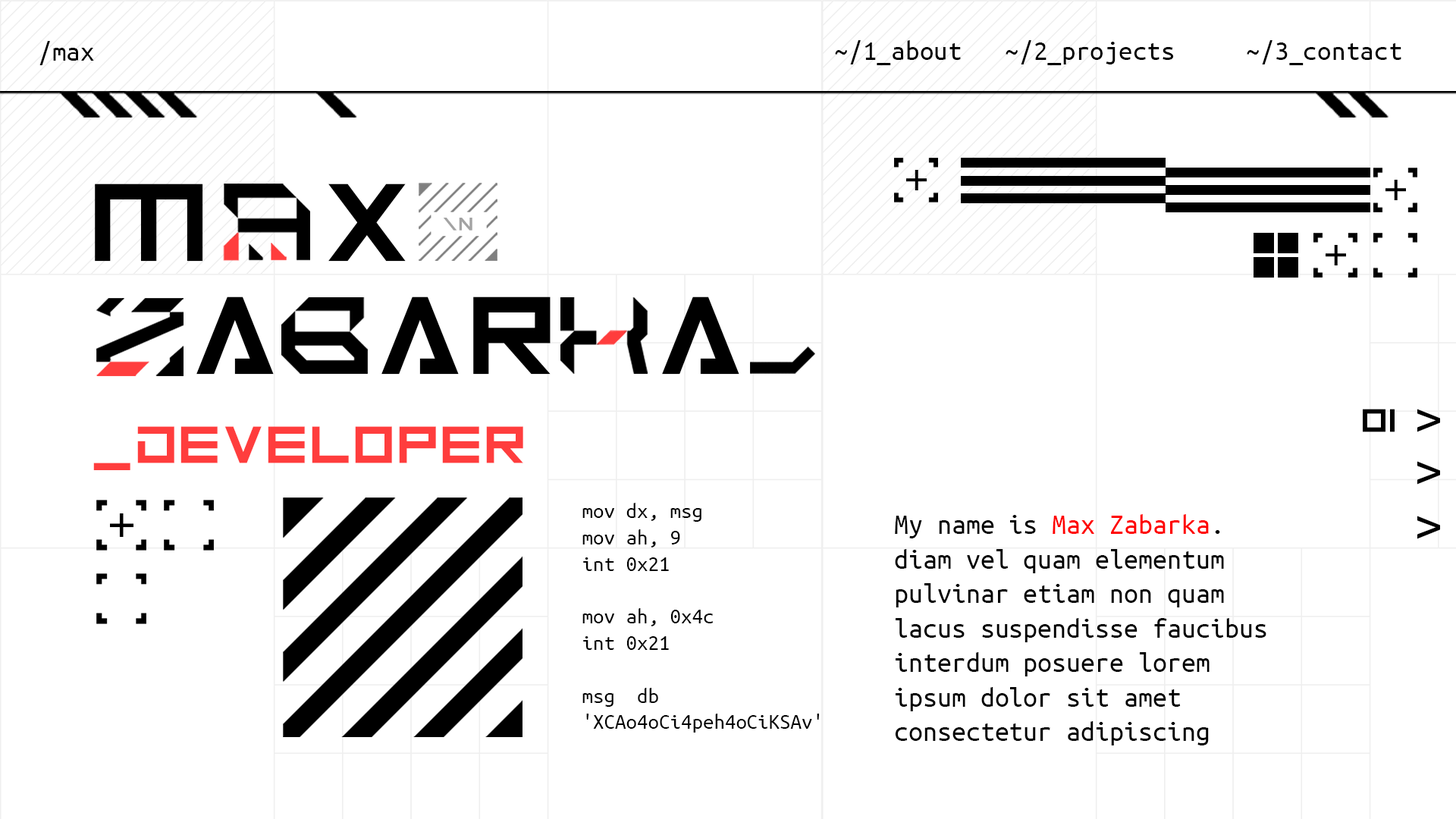
<style>
.page{position:relative;width:1456px;height:819px;background:#ffffff}
.page>*{position:absolute;margin:0}
.t1{font:28.1px "UbuntuMono-Regular";color:#000000}
.t2{font:28.4px "UbuntuMono-Regular";color:#000000}
.t3{font:123px "Android101";color:#000000}
.t4{font:20.5px "Android101";color:#a3a3a3}
.t5{font:36.5px "Android101";color:#000000}
.t6{font:58.1px "Android101";color:#ff3d3d}
.t7{font:21.9px "UbuntuMono-Regular";color:#000000}
.t8{font:28.7px "UbuntuMono-Regular";color:#010101}
.t9{font:28.7px "UbuntuMono-Regular";color:#ff0000}
</style>
<div class="page">
<p class="t1" style="left:39px;top:41px;width:55px;height:24px">/max</p>
<p class="t2" style="left:835px;top:40px;width:566px;height:25px">~/1_about   ~/2_projects   ~/3_contact</p>
<p class="t3" style="left:95px;top:184px;width:311px;height:78px">M  X</p>
<p class="t4" style="left:443px;top:218px;width:29px;height:13px">\n</p>
<p class="t3" style="left:196px;top:297px;width:543px;height:78px">A  AR  A</p>
<p class="t5" style="left:1363px;top:409px;width:77px;height:23px">01 &gt;</p>
<p class="t6" style="left:93px;top:426px;width:430px;height:44px">_DEVELOPER</p>
<p class="t5" style="left:1417px;top:461px;width:23px;height:24px">&gt;</p>
<p class="t7" style="left:582px;top:503px;width:237px;height:230px">mov dx, msg<br>mov ah, 9<br>int 0x21<br><br>mov ah, 0x4c<br>int 0x21<br><br>msg  db<br>'XCAo4oCi4peh4oCiKSAv'</p>
<p class="t8" style="left:895px;top:514px;width:371px;height:231px">My name is <span class="t9">Max Zabarka</span>.<br>diam vel quam elementum<br>pulvinar etiam non quam<br>lacus suspendisse faucibus<br>interdum posuere lorem<br>ipsum dolor sit amet<br>consectetur adipiscing</p>
<p class="t5" style="left:1417px;top:516px;width:23px;height:23px">&gt;</p>
</div>
